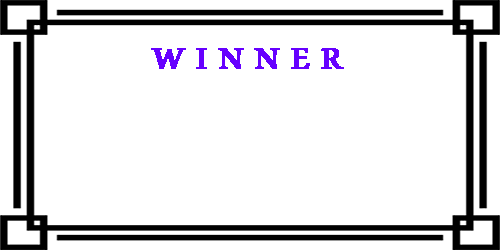
<style>
.page{position:relative;width:500px;height:250px;background:#ffffff}
.page>*{position:absolute;margin:0}
.t1{font:52px "Aldhabi";letter-spacing:0.2em;color:#6600ff;font-weight:bold}
</style>
<div class="page">
<p class="t1" style="left:151px;top:48px;width:193px;height:21px">WINNER</p>
</div>
